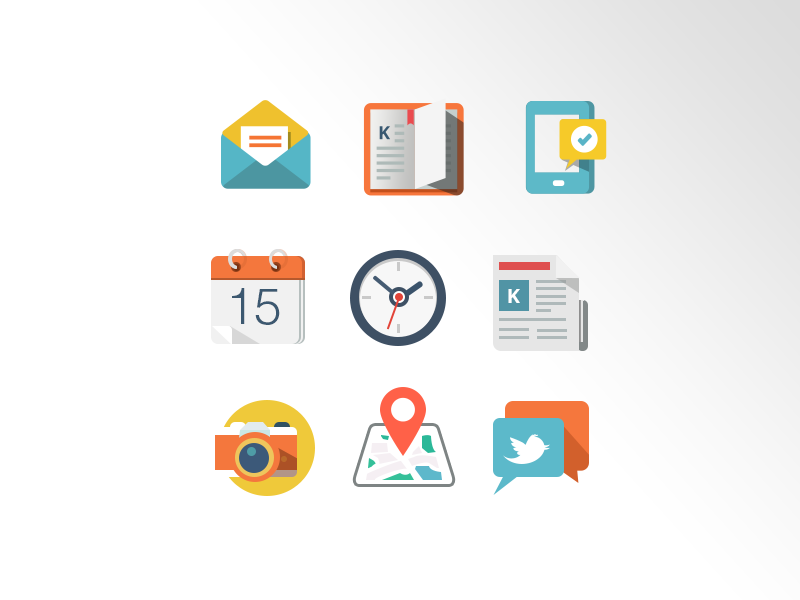
<style>
.page{position:relative;width:800px;height:600px;background:#ffffff}
.page>*{position:absolute;margin:0}
.t1{font:50px "Helvetica-Light";color:#3c5870}
.t2{font:20px "OpenSans-Bold";color:#ffffff}
</style>
<div class="page">
<p class="t1" style="left:232px;top:288px;width:48px;height:37px">15</p>
<p class="t2" style="left:508px;top:289px;width:12px;height:14px">K</p>
</div>
